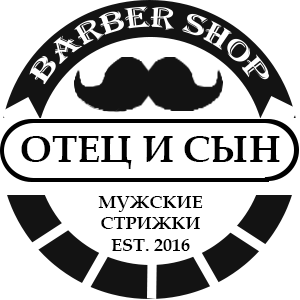
<style>
.page{position:relative;width:300px;height:300px;background:#ffffff}
.page>*{position:absolute;margin:0}
.t1{font:38px "BookAntiqua-Bold";color:#000000}
.t2{font:18px "BookAntiqua-Bold";color:#000000}
</style>
<div class="page">
<p class="t1" style="left:21px;top:136px;width:259px;height:33px">ОТЕЦ И СЫН</p>
<p class="t2" style="left:98px;top:196px;width:105px;height:55px;text-align:center">МУЖСКИЕ СТРИЖКИ EST. 2016</p>
</div>
